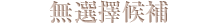
<style>
.page{position:relative;width:219px;height:23px;background:#ffffff}
.page>*{position:absolute;margin:0}
.t1{font:24px "RyuminPr6N-ExBold"}
</style>
<div class="page">
<p class="t1" style="left:49px;top:0px;width:119px;height:24px">無選擇候補</p>
</div>
